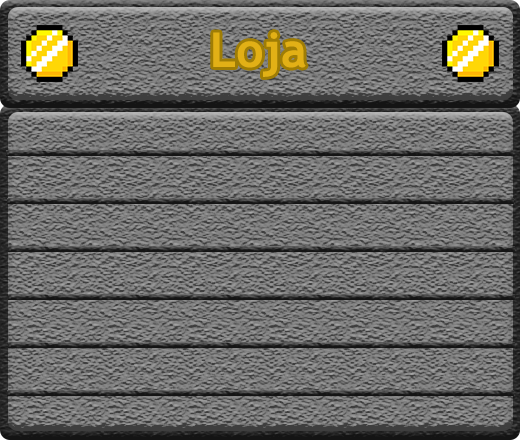
<style>
.page{position:relative;width:520px;height:440px}
.page>*{position:absolute;margin:0}
.t1{font:48px "TrebuchetMS-Bold";color:#e2b016}
</style>
<div class="page">
<p class="t1" style="left:213px;top:32px;width:93px;height:45px">Loja</p>
</div>
